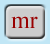
<style>
.page{position:relative;width:50px;height:44px;background:#cccccc}
.page>*{position:absolute;margin:0}
.t1{font:24px "Times-Roman";color:#990000}
</style>
<div class="page">
<p class="t1" style="left:11px;top:16px;width:27px;height:12px">mr</p>
</div>
